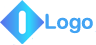
<style>
.page{position:relative;width:96px;height:45px;background:#ffffff}
.page>*{position:absolute;margin:0}
.t1{font:20.5px "ArialRoundedMTBold";color:#42a3f3}
</style>
<div class="page">
<p class="t1" style="left:45px;top:13px;width:48px;height:21px">Logo</p>
</div>
